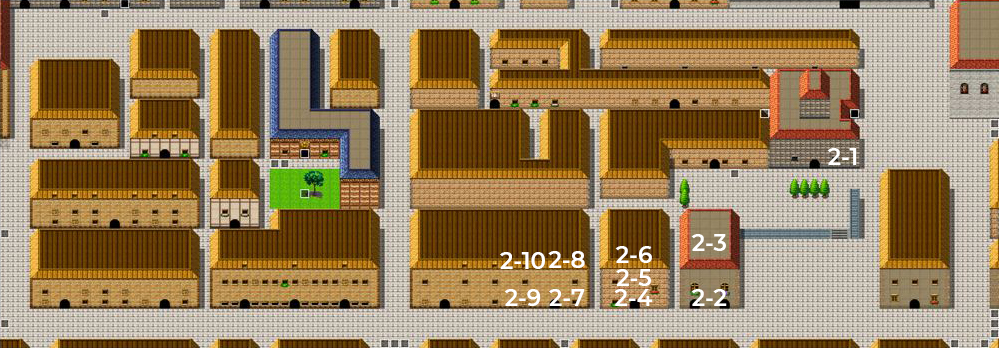
<style>
.page{position:relative;width:999px;height:348px}
.page>*{position:absolute;margin:0}
.t1{font:23px "Montserrat-SemiBold";color:#ffffff}
</style>
<div class="page">
<p class="t1" style="left:827px;top:148px;width:30px;height:17px">2-1</p>
<p class="t1" style="left:615px;top:246px;width:37px;height:17px">2-6</p>
<p class="t1" style="left:691px;top:234px;width:35px;height:17px">2-3</p>
<p class="t1" style="left:500px;top:252px;width:45px;height:17px">2-10</p>
<p class="t1" style="left:548px;top:251px;width:37px;height:17px">2-8</p>
<p class="t1" style="left:616px;top:269px;width:35px;height:17px">2-5</p>
<p class="t1" style="left:504px;top:289px;width:37px;height:17px">2-9</p>
<p class="t1" style="left:549px;top:289px;width:36px;height:17px">2-7</p>
<p class="t1" style="left:614px;top:289px;width:39px;height:17px">2-4</p>
<p class="t1" style="left:691px;top:289px;width:36px;height:17px">2-2</p>
</div>
